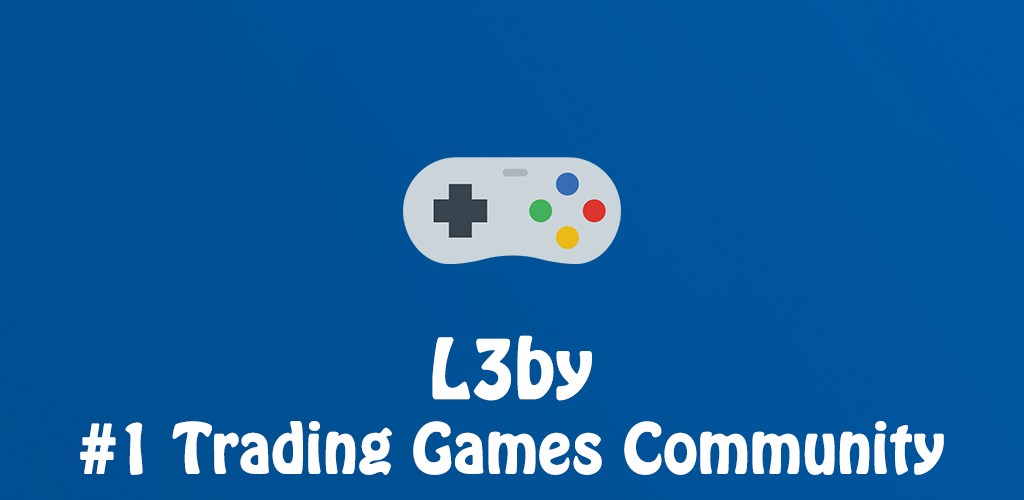
<style>
.page{position:relative;width:1024px;height:500px}
.page>*{position:absolute;margin:0}
.t1{font:72px "HoboStd";color:#fefefe;font-weight:bold}
.t2{font:60px "HoboStd";color:#fefefe;font-weight:bold}
</style>
<div class="page">
<p class="t1" style="left:432px;top:335px;width:160px;height:66px">L3by</p>
<p class="t2" style="left:80px;top:421px;width:864px;height:54px">#1 Trading Games Community</p>
</div>
